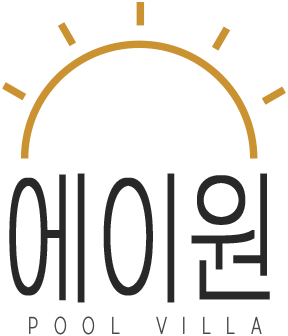
<style>
.page{position:relative;width:288px;height:336px;background:#ffffff}
.page>*{position:absolute;margin:0}
.t1{font:148.5px "GmarketSansLight";color:#272827;font-weight:bold;scale:0.63 1}
.t2{font:21px "GmarketSansLight";letter-spacing:1.2em;color:#494946;font-weight:bold;scale:0.63 1}
</style>
<div class="page">
<p class="t1" style="left:9px;top:173px;width:261px;height:130px">에이원</p>
<p class="t2" style="left:29px;top:316px;width:233px;height:19px">POOL VILLA</p>
</div>
